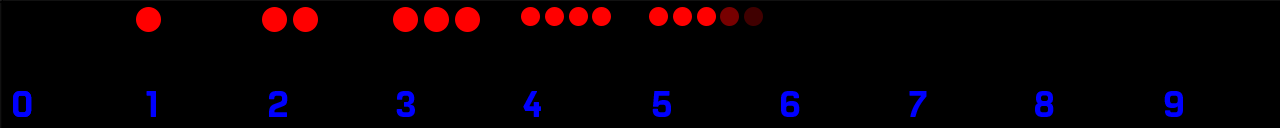
<style>
.page{position:relative;width:1280px;height:128px;background:#000000}
.page>*{position:absolute;margin:0}
.t1{font:36px "ManifoldCF-Heavy";color:#0000ff}
</style>
<div class="page">
<p class="t1" style="left:13px;top:91px;width:19px;height:26px">0</p>
<p class="t1" style="left:13px;top:91px;width:19px;height:26px">0</p>
<p class="t1" style="left:146px;top:91px;width:10px;height:26px">1</p>
<p class="t1" style="left:269px;top:91px;width:19px;height:26px">2</p>
<p class="t1" style="left:396px;top:91px;width:19px;height:26px">3</p>
<p class="t1" style="left:523px;top:91px;width:18px;height:26px">4</p>
<p class="t1" style="left:652px;top:91px;width:19px;height:26px">5</p>
<p class="t1" style="left:781px;top:91px;width:19px;height:26px">6</p>
<p class="t1" style="left:909px;top:91px;width:18px;height:26px">7</p>
<p class="t1" style="left:1035px;top:91px;width:19px;height:26px">8</p>
<p class="t1" style="left:1164px;top:91px;width:19px;height:26px">9</p>
</div>
